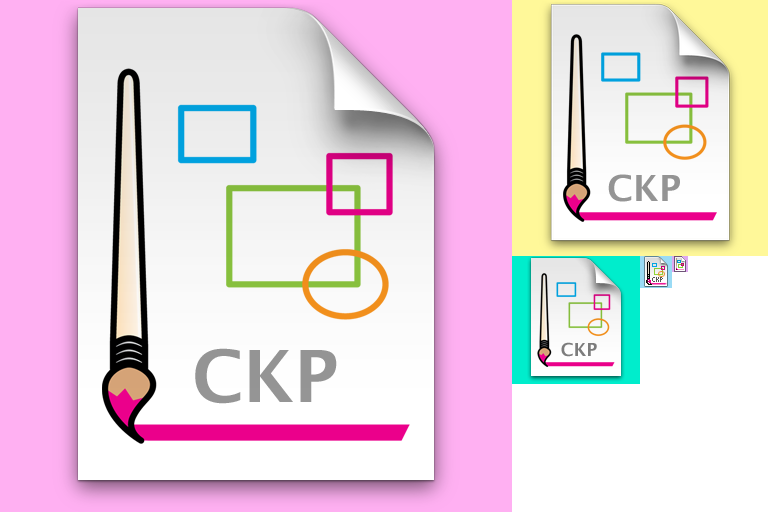
<style>
.page{position:relative;width:768px;height:512px;background:#ffffff}
.page>*{position:absolute;margin:0}
.t1{font:36px "LucidaGrande-Bold";color:#959595}
.t2{font:7px "KKFixed4x7";color:#555555}
.t3{font:18px "LucidaGrande-Bold";color:#7d7d7d}
.t4{font:72px "LucidaGrande-Bold";color:#959595}
</style>
<div class="page">
<p class="t1" style="left:608px;top:174px;width:72px;height:28px">CKP</p>
<p class="t2" style="left:652px;top:277px;width:11px;height:5px">CKP</p>
<p class="t3" style="left:561px;top:342px;width:36px;height:15px">CKP</p>
<p class="t4" style="left:195px;top:348px;width:142px;height:56px">CKP</p>
</div>
